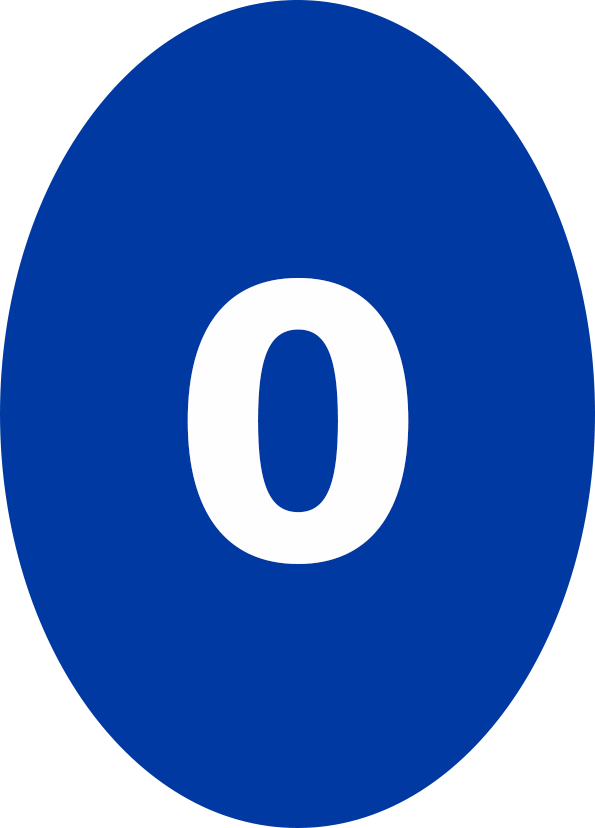
<style>
.page{position:relative;width:595px;height:828px;background:#0039a1}
.page>*{position:absolute;margin:0}
.t1{font:401.8px "Montserrat-Bold";color:#fefeff}
</style>
<div class="page">
<p class="t1" style="left:187px;top:278px;width:222px;height:286px">0</p>
</div>
